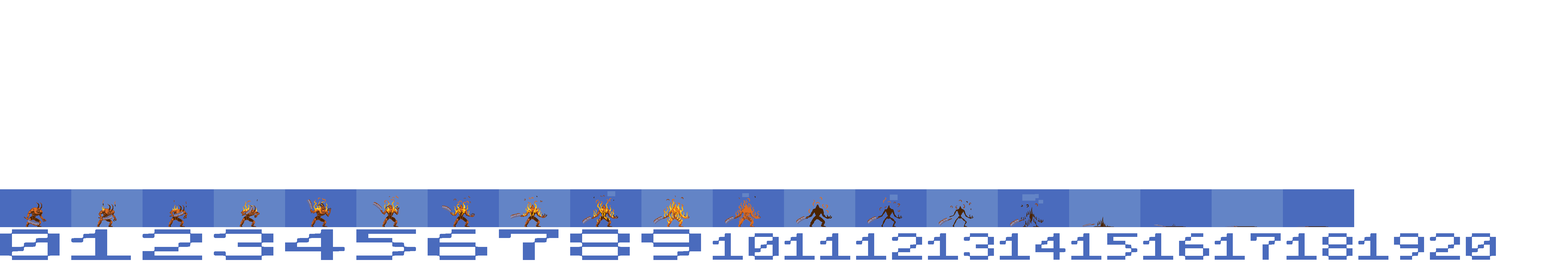
<style>
.page{position:relative;width:1568px;height:265px;background:#ffffff}
.page>*{position:absolute;margin:0}
.t1{font:34.9px "MSX-Screen0";color:#4a6bbd;scale:2.73 1}
.t2{font:30.3px "MSX-Screen0";color:#4a6bbd;scale:1.58 1}
</style>
<div class="page">
<p class="t1" style="left:0px;top:229px;width:701px;height:31px">0123456789</p>
<p class="t2" style="left:713px;top:233px;width:783px;height:27px">1011121314151617181920</p>
</div>
